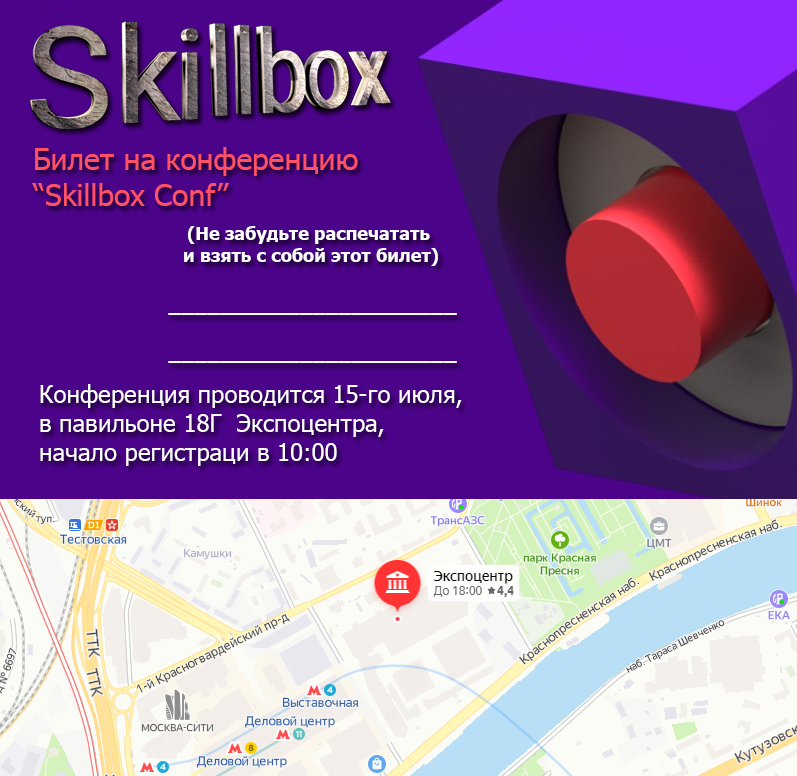
<style>
.page{position:relative;width:797px;height:776px;background:#4b0389}
.page>*{position:absolute;margin:0}
.t1{font:30px "Tahoma";color:#ff5164}
.t2{font:18px "Tahoma-Bold";color:#fefdfd}
.t3{font:24px/48px "Tahoma";color:#fefdfd}
.t4{font:24px "Tahoma";color:#fefdfd}
</style>
<div class="page">
<p class="t1" style="left:32px;top:147px;width:326px;height:59px;text-align:right">Билет на конференцию<br>“Skillbox Conf”</p>
<p class="t2" style="left:184px;top:226px;width:254px;height:40px;text-align:center">(Не забудьте распечатать <br>и взять с собой этот билет)</p>
<p class="t3" style="left:168px;top:313px;width:289px;height:50px;text-align:right">______________________<br>______________________</p>
<p class="t4" style="left:40px;top:384px;width:422px;height:82px;text-align:right">Конференция проводится 15-го июля, <br>в павильоне 18Г  Экспоцентра,<br>начало регистраци в 10:00</p>
</div>
